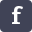
<style>
.page{position:relative;width:32px;height:32px;background:#404356}
.page>*{position:absolute;margin:0}
.t1{font:23.8px "Clavo-Bold";color:#ffffff}
</style>
<div class="page">
<p class="t1" style="left:11px;top:6px;width:12px;height:18px">f</p>
</div>
